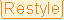
<style>
.page{position:relative;width:64px;height:20px;background:#fef5d4}
.page>*{position:absolute;margin:0}
.t1{font:16px "ArialMT";letter-spacing:0.05em;color:#ee831f}
</style>
<div class="page">
<p class="t1" style="left:4px;top:0px;width:62px;height:19px">Restyle</p>
</div>
